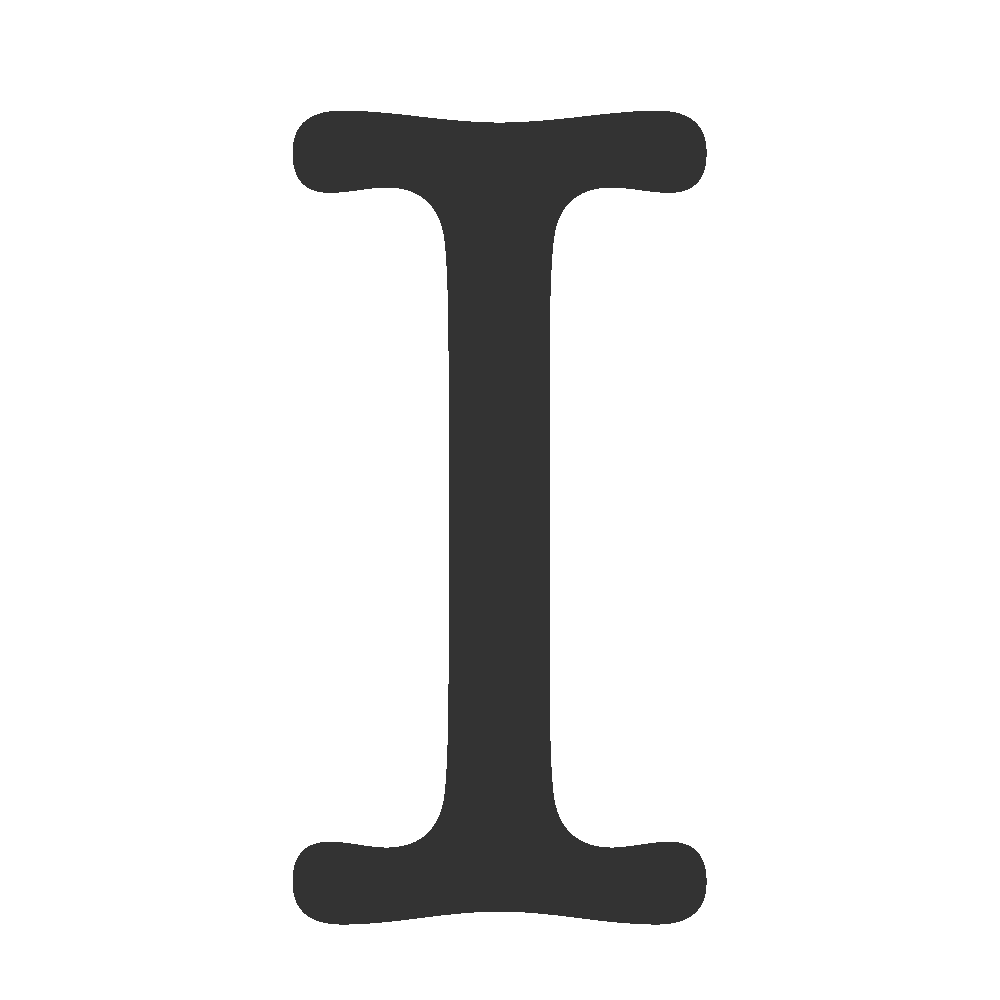
<style>
.page{position:relative;width:1000px;height:1000px;background:#ffffff}
.page>*{position:absolute;margin:0}
.t1{font:1166.7px "AmericanTypewriterMedium";color:#333333}
</style>
<div class="page">
<p class="t1" style="left:293px;top:111px;width:414px;height:814px">I</p>
</div>
